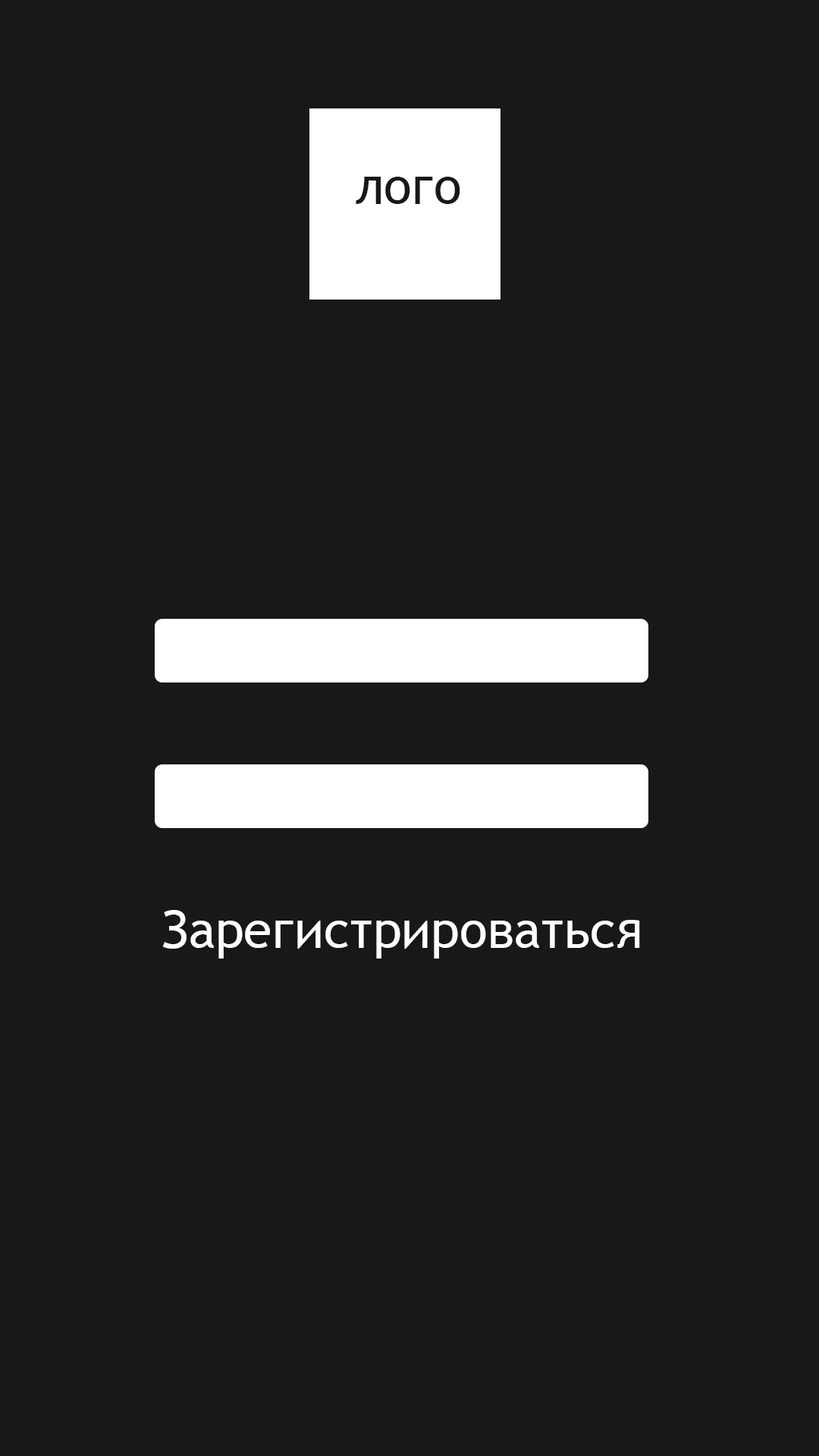
<style>
.page{position:relative;width:819px;height:1456px;background:#18181a}
.page>*{position:absolute;margin:0}
.t1{font:51.6px "TrebuchetMS";color:#181819}
.t2{font:51.6px "TrebuchetMS";color:#ffffff}
</style>
<div class="page">
<p class="t1" style="left:356px;top:177px;width:104px;height:27px">лого</p>
<p class="t2" style="left:162px;top:910px;width:478px;height:49px">Зарегистрироваться</p>
</div>
